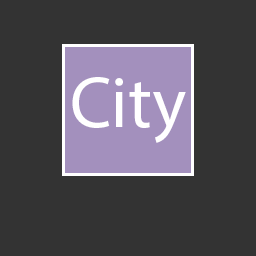
<style>
.page{position:relative;width:256px;height:256px;background:#333333}
.page>*{position:absolute;margin:0}
.t1{font:72px "MyriadPro-Regular";color:#ffffff}
</style>
<div class="page">
<p class="t1" style="left:72px;top:77px;width:114px;height:66px">City</p>
</div>
